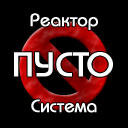
<style>
.page{position:relative;width:128px;height:128px;background:#000000}
.page>*{position:absolute;margin:0}
.t1{font:18px "BauhausC-Medium";color:#ffffff;font-weight:bold}
.t2{font:34px "BauhausC-Medium";color:#ffffff;font-weight:bold}
</style>
<div class="page">
<p class="t1" style="left:30px;top:13px;width:68px;height:17px">Реактор</p>
<p class="t2" style="left:14px;top:52px;width:99px;height:25px">ПУСТО</p>
<p class="t1" style="left:31px;top:99px;width:66px;height:14px">Система</p>
</div>
